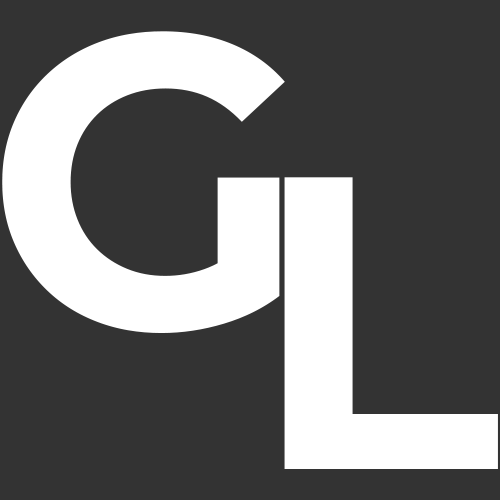
<style>
.page{position:relative;width:500px;height:500px;background:#333333}
.page>*{position:absolute;margin:0}
.t1{font:416.7px "MontserratRoman-Bold";color:#ffffff}
</style>
<div class="page">
<p class="t1" style="left:2px;top:31px;width:283px;height:302px">G</p>
<p class="t1" style="left:284px;top:177px;width:214px;height:292px">L</p>
</div>
